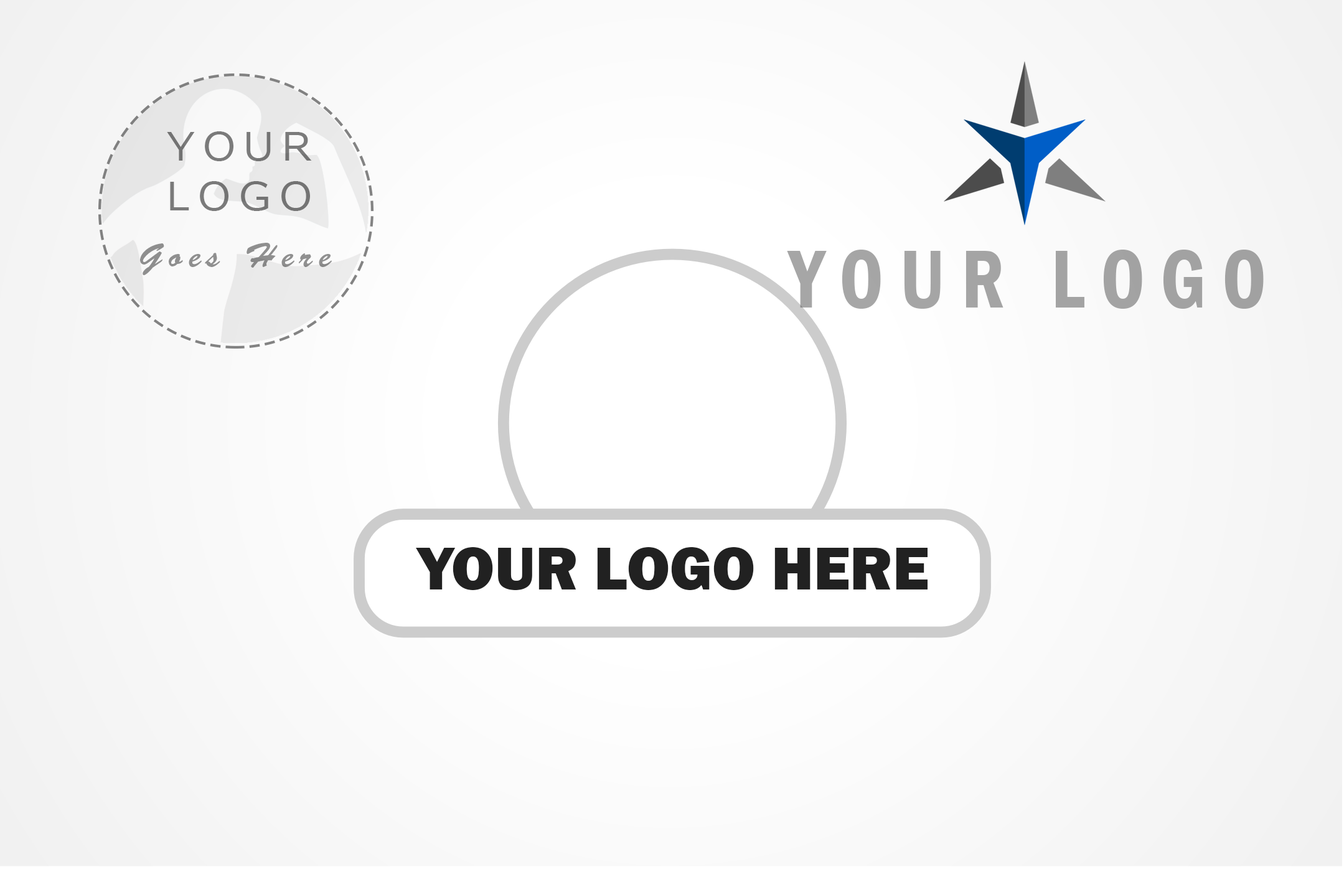
<style>
.page{position:relative;width:1344px;height:887px}
.page>*{position:absolute;margin:0}
.t1{font:41.6px "AlbanyAMT";letter-spacing:0.2em;color:#7a7a7a}
.t2{font:33.7px "BrushScriptStd";letter-spacing:0.2em;color:#8f8f8f}
.t3{font:84.4px "FranklinGothic-DemiCond";letter-spacing:0.2em;color:#a4a4a4;scale:0.94 1}
.t4{font:15px "FranklinGothic-Heavy";color:#212121}
</style>
<div class="page">
<p class="t1" style="left:167px;top:131px;width:145px;height:80px;text-align:center">YOUR<br>LOGO</p>
<p class="t2" style="left:140px;top:243px;width:192px;height:32px">Goes Here</p>
<p class="t3" style="left:787px;top:250px;width:477px;height:59px">YOUR LOGO</p>
<p class="t4" style="left:416px;top:547px;width:512px;height:43px">YOUR LOGO HERE</p>
</div>
